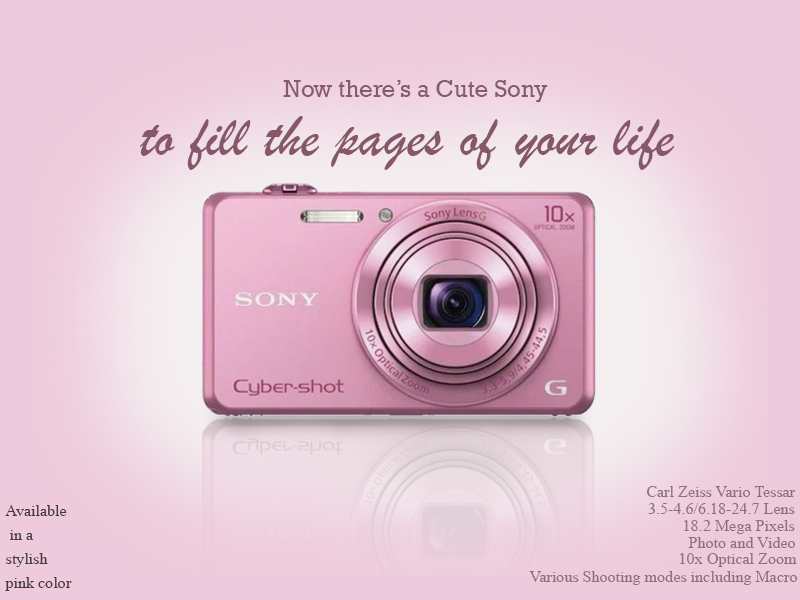
<style>
.page{position:relative;width:800px;height:600px;background:#eecbdc}
.page>*{position:absolute;margin:0}
.t1{font:24px "Rockwell";color:#875b6c}
.t2{font:60px "BrushScriptMT";color:#865768}
.t3{font:24px "Microsoft-Himalaya";color:#906f7b}
.t4{font:24px/24px "Microsoft-Himalaya";color:#43383c}
</style>
<div class="page">
<p class="t1" style="left:283px;top:80px;width:265px;height:22px">Now there’s a Cute Sony</p>
<p class="t2" style="left:140px;top:116px;width:534px;height:54px">to fill the pages of your life</p>
<p class="t3" style="left:647px;top:486px;width:148px;height:11px">Carl Zeiss Vario Tessar</p>
<p class="t4" style="left:5px;top:505px;width:67px;height:86px">Available<br> in a <br>stylish <br>pink color</p>
<p class="t3" style="left:648px;top:503px;width:147px;height:11px">3.5-4.6/6.18-24.7 Lens</p>
<p class="t3" style="left:684px;top:520px;width:111px;height:14px">18.2 Mega Pixels</p>
<p class="t3" style="left:688px;top:537px;width:108px;height:11px">Photo and Video</p>
<p class="t3" style="left:680px;top:553px;width:117px;height:14px">10x Optical Zoom</p>
<p class="t3" style="left:529px;top:571px;width:269px;height:14px">Various Shooting modes including Macro</p>
</div>
